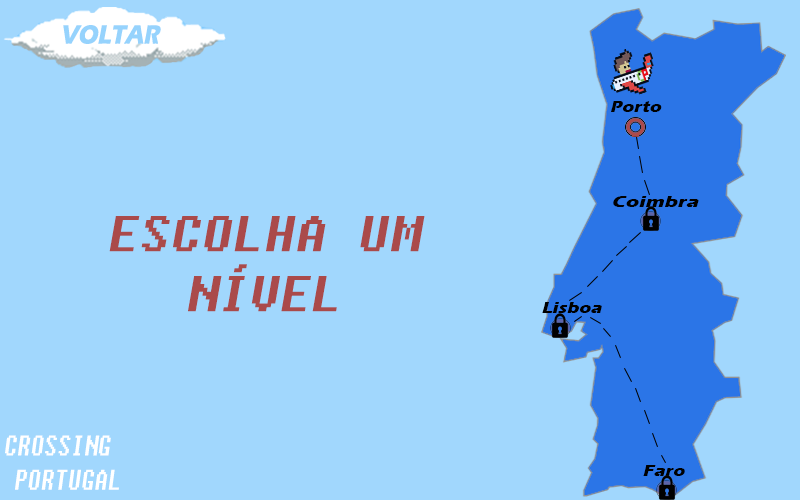
<style>
.page{position:relative;width:800px;height:500px;background:#a1d7fd}
.page>*{position:absolute;margin:0}
.t1{font:27.1px "ErasITC-Bold";color:#96d3fd;font-style:italic;scale:0.83 1}
.t2{font:16.1px "ErasITC-Bold";color:#000000;font-style:italic;scale:1.14 1}
.t3{font:16.1px "ErasITC-Bold";color:#000000;font-style:italic;scale:1.27 1}
.t4{font:50px "Fixedsys";color:#aa4a4a;font-style:italic}
.t5{font:28.4px "Fixedsys";color:#ffffff;font-style:italic;scale:0.76 1}
</style>
<div class="page">
<p class="t1" style="left:63px;top:25px;width:98px;height:19px">VOLTAR</p>
<p class="t2" style="left:611px;top:101px;width:51px;height:11px">Porto</p>
<p class="t3" style="left:613px;top:196px;width:86px;height:11px">Coimbra</p>
<p class="t4" style="left:109px;top:216px;width:316px;height:96px;text-align:center">ESCOLHA UM NÍVEL</p>
<p class="t2" style="left:542px;top:302px;width:60px;height:11px">Lisboa</p>
<p class="t5" style="left:5px;top:435px;width:114px;height:55px">CROSSING <br> PORTUGAL</p>
<p class="t2" style="left:643px;top:465px;width:42px;height:11px">Faro</p>
</div>
